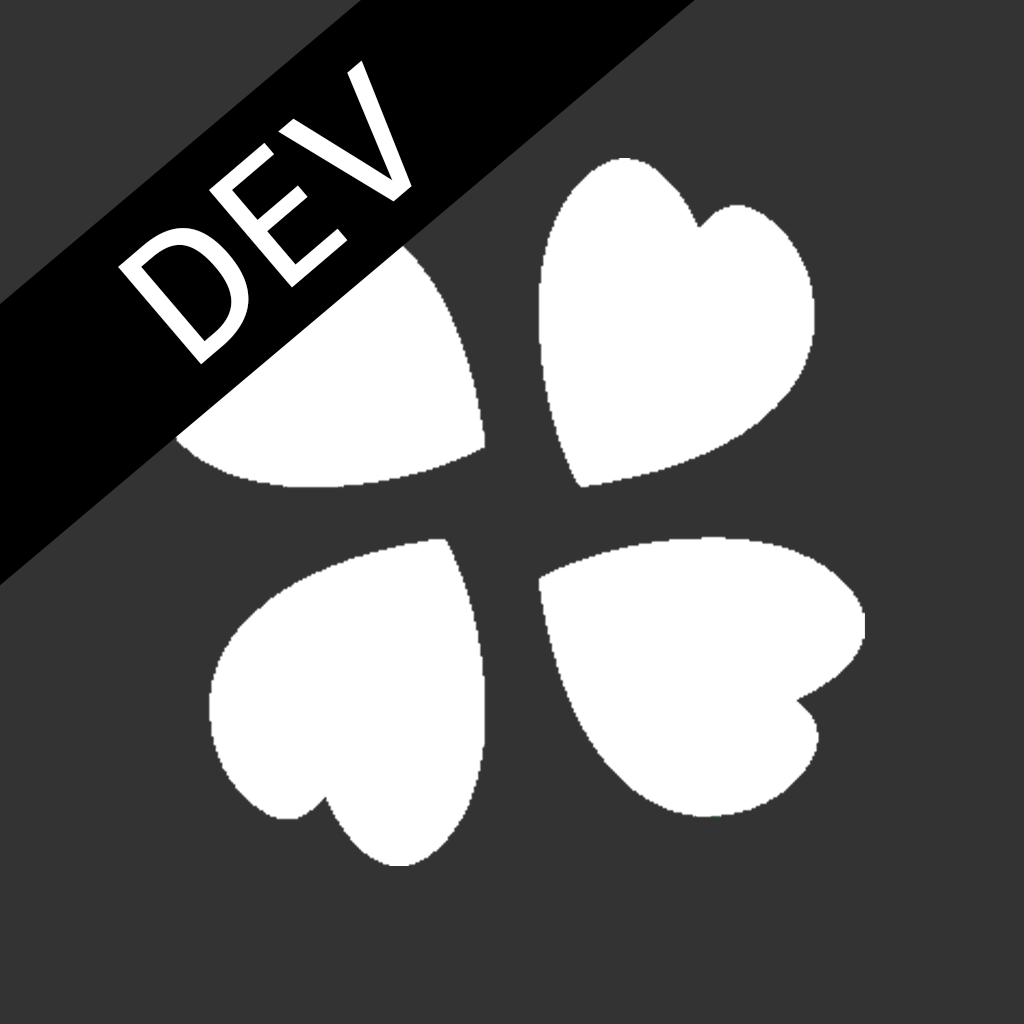
<style>
.page{position:relative;width:1024px;height:1024px;background:#333333}
.page>*{position:absolute;margin:0}
.t1{font:200px "Consolas";color:#ffffff}
</style>
<div class="page">
<p class="t1" style="left:118px;top:60px;width:294px;height:305px;rotate:-40deg">DEV</p>
</div>
